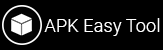
<style>
.page{position:relative;width:163px;height:50px;background:#000000}
.page>*{position:absolute;margin:0}
.t1{font:18.4px "Roboto-Light";color:#ffffff}
</style>
<div class="page">
<p class="t1" style="left:44px;top:18px;width:116px;height:18px">APK Easy Tool</p>
</div>
